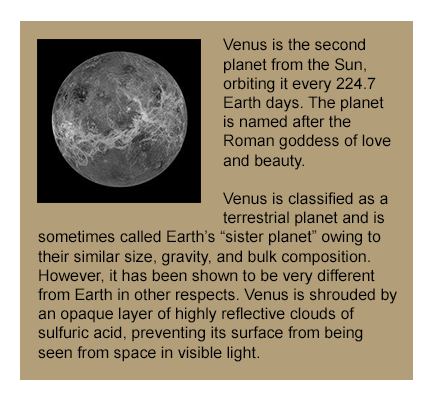
<style>
.page{position:relative;width:434px;height:400px;background:#b29f7a}
.page>*{position:absolute;margin:0}
.t1{font:16px "ArialMT";color:#000000}
</style>
<div class="page">
<p class="t1" style="left:38px;top:38px;width:359px;height:324px">Venus is the second planet from the Sun, orbiting it every 224.7 Earth days. The planet is named after the Roman goddess of love and beauty.<br><br>Venus is classified as a terrestrial planet and is sometimes called Earth’s “sister planet” owing to their similar size, gravity, and bulk composition. However, it has been shown to be very different from Earth in other respects. Venus is shrouded by an opaque layer of highly reflective clouds of sulfuric acid, preventing its surface from being seen from space in visible light.</p>
</div>
